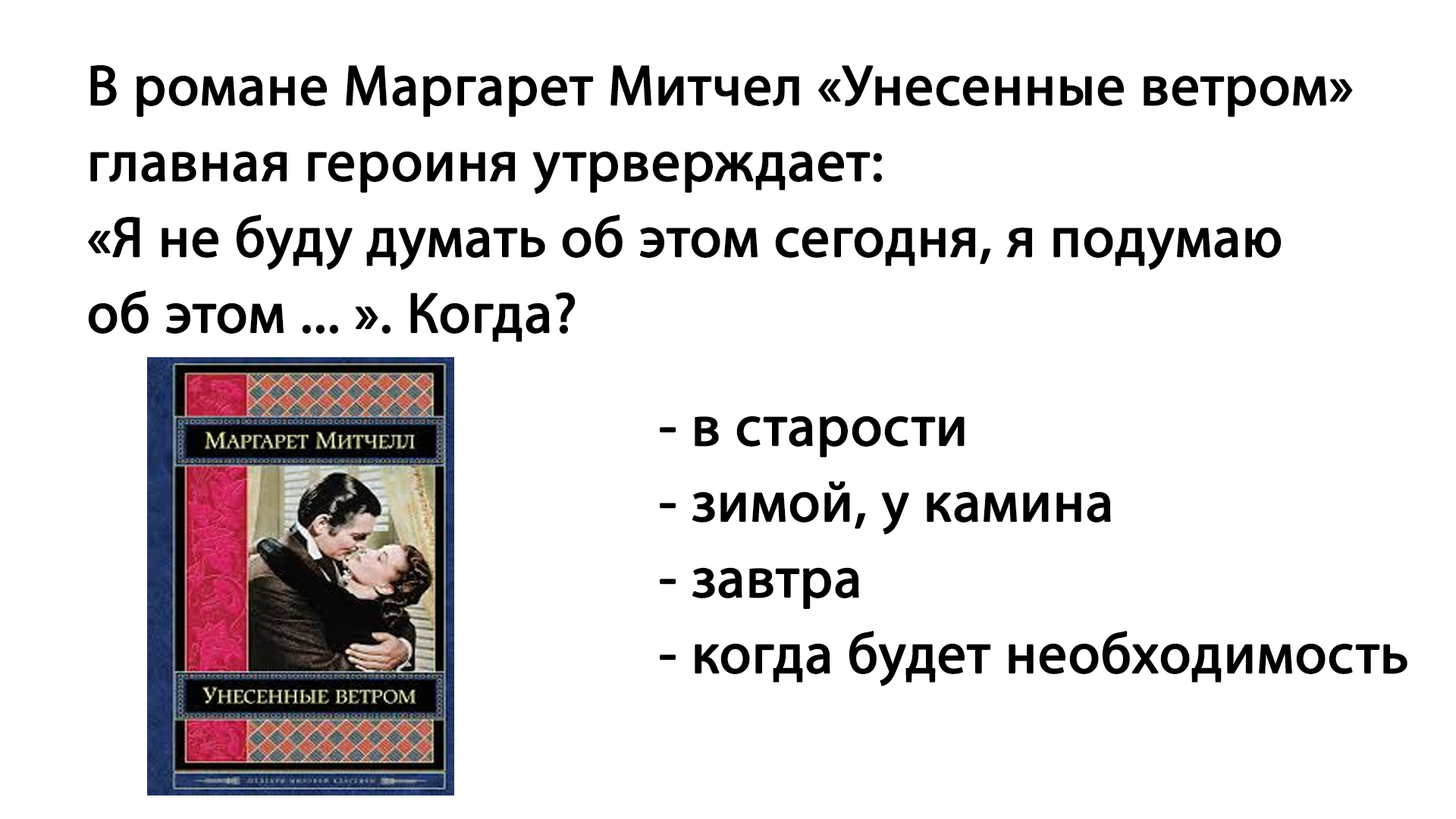
<style>
.page{position:relative;width:1456px;height:819px;background:#ffffff}
.page>*{position:absolute;margin:0}
.t1{font:56.9px/75.8px "MyriadPro-Regular";color:#000000;font-weight:bold}
</style>
<div class="page">
<p class="t1" style="left:87px;top:65px;width:1266px;height:277px">В романе Маргарет Митчел «Унесенные ветром»<br>главная героиня утрверждает: <br>«Я не буду думать об этом сегодня, я подумаю <br>об этом ... ». Когда?</p>
<p class="t1" style="left:660px;top:416px;width:747px;height:270px">- в старости<br>- зимой, у камина<br>- завтра <br>- когда будет необходимость</p>
</div>
